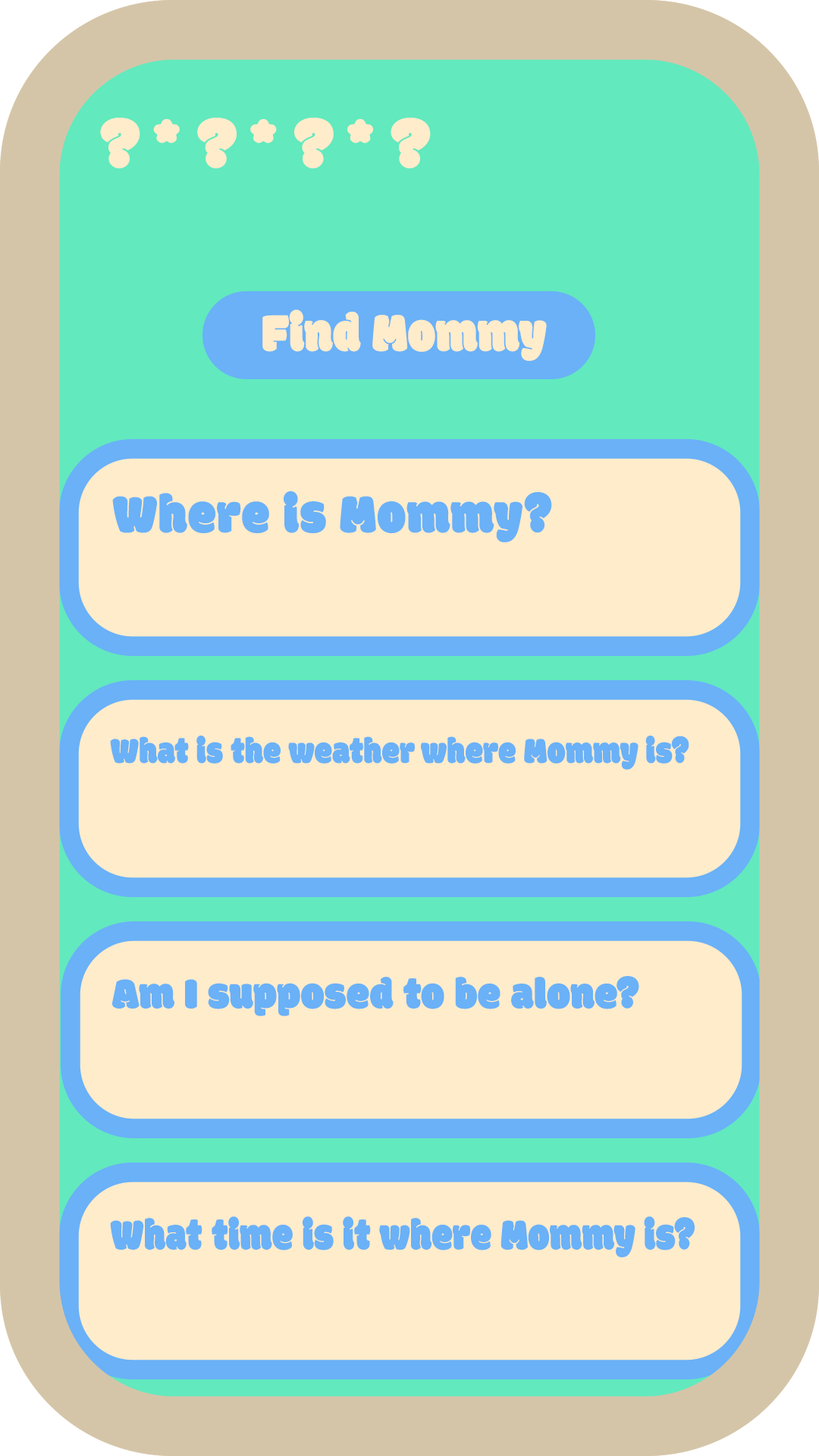
<style>
.page{position:relative;width:819px;height:1456px;background:#ffeccb}
.page>*{position:absolute;margin:0}
.t1{font:70.5px "Modak";letter-spacing:0.005em;color:#ffeccb;scale:1.05 1}
.t2{font:56.4px "Modak";letter-spacing:0.005em;color:#ffeccb;scale:0.87 1}
.t3{font:56.4px "Modak";letter-spacing:0.02em;color:#6ab1f7;scale:0.9 1}
.t4{font:37.6px "Modak";letter-spacing:0.005em;color:#6ab1f7;scale:0.86 1}
.t5{font:45.1px "Modak";letter-spacing:0.005em;color:#6ab1f7;scale:0.93 1}
.t6{font:45.1px "Modak";letter-spacing:0.005em;color:#6ab1f7;scale:0.84 1}
</style>
<div class="page">
<p class="t1" style="left:100px;top:118px;width:331px;height:50px">? * ? * ? * ?</p>
<p class="t2" style="left:262px;top:309px;width:285px;height:52px">Find Mommy</p>
<p class="t3" style="left:112px;top:491px;width:440px;height:52px">Where is Mommy?</p>
<p class="t4" style="left:110px;top:736px;width:579px;height:34px">What is the weather where Mommy is?</p>
<p class="t5" style="left:112px;top:976px;width:527px;height:40px">Am I supposed to be alone?</p>
<p class="t6" style="left:110px;top:1216px;width:585px;height:41px">What time is it where Mommy is?</p>
</div>
